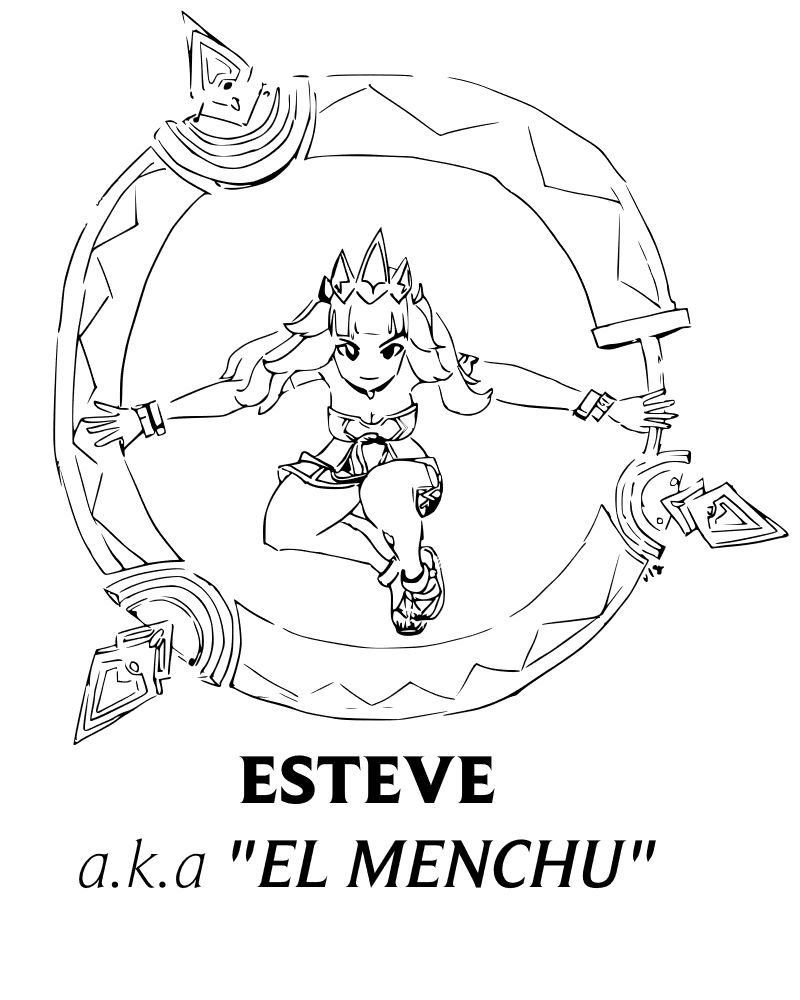
<style>
.page{position:relative;width:800px;height:1000px;background:#ffffff}
.page>*{position:absolute;margin:0}
.t1{font:70px "BeaufortforLOL-MediumItalic";color:#000000}
.t2{font:70px "BeaufortforLOL-Heavy";color:#000000}
.t3{font:70px "BeaufortforLOL-LightItalic";color:#000000}
</style>
<div class="page">
<p class="t1" style="left:79px;top:755px;width:577px;height:134px;text-align:center"><span class="t2">ESTEVE<br></span><span class="t3">a.k.a </span>"EL MENCHU"</p>
</div>
